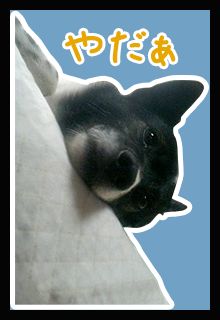
<style>
.page{position:relative;width:220px;height:320px;background:#71a1c5}
.page>*{position:absolute;margin:0}
.t1{font:56.9px "APJapanesefont";color:#e6a800}
</style>
<div class="page">
<p class="t1" style="left:65px;top:30px;width:111px;height:37px">やだぁ</p>
</div>
